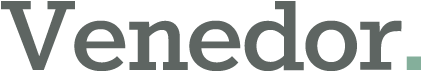
<style>
.page{position:relative;width:422px;height:72px;background:#ffffff}
.page>*{position:absolute;margin:0}
.t1{font:116px "Rokkitt-Bold";letter-spacing:-0.025em;color:#5e6562}
.t2{font:116px "Rokkitt-Bold";letter-spacing:-0.025em;color:#84af9b}
</style>
<div class="page">
<p class="t1" style="left:1px;top:1px;width:420px;height:70px">Venedor<span class="t2">.</span></p>
</div>
